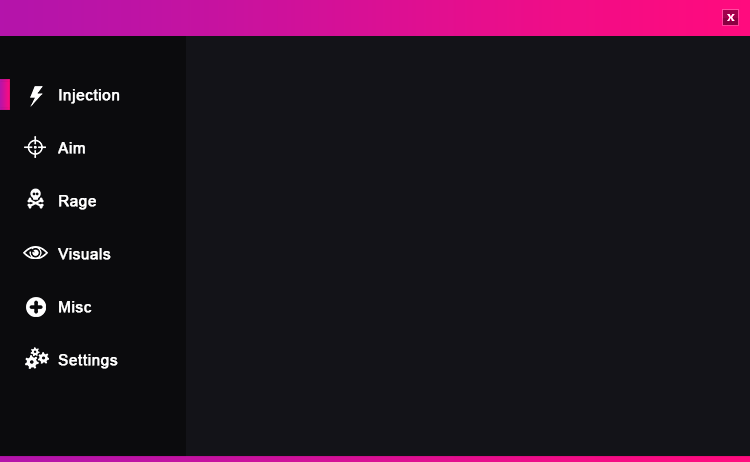
<style>
.page{position:relative;width:750px;height:462px;background:#131318}
.page>*{position:absolute;margin:0}
.t1{font:15px/53px "ArialMT";letter-spacing:0.02em;color:#ffffff;font-weight:bold}
</style>
<div class="page">
<p class="t1" style="left:58px;top:89px;width:62px;height:280px">Injection<br>Aim<br>Rage<br>Visuals<br>Misc<br>Settings</p>
</div>
